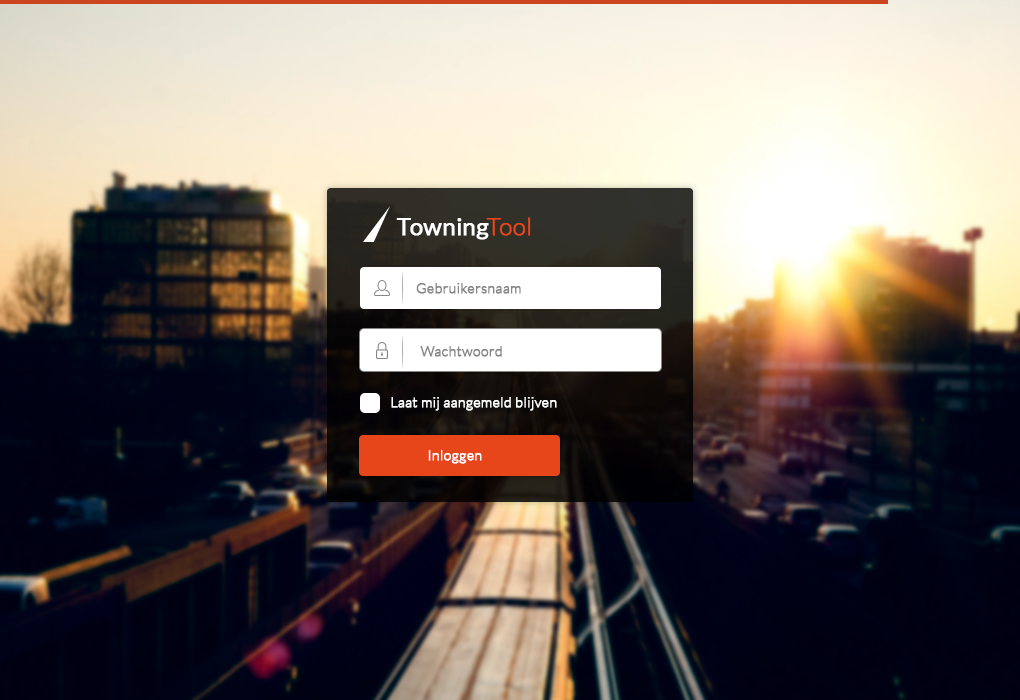
<style>
.page{position:relative;width:1020px;height:700px}
.page>*{position:absolute;margin:0}
.t1{font:24px "Lato-Regular";letter-spacing:0.005em;color:#ffffff;font-weight:bold}
.t2{font:24px "Lato-Light";letter-spacing:0.005em;color:#e7461b;font-weight:bold}
.t3{font:14px "Lato-Light";letter-spacing:0.005em;color:#868685;font-weight:bold}
.t4{font:14px "Lato-Light";letter-spacing:0.005em;color:#ffffff;font-weight:bold}
</style>
<div class="page">
<p class="t1" style="left:396px;top:217px;width:135px;height:23px">Towning<span class="t2">Tool</span></p>
<p class="t3" style="left:416px;top:283px;width:105px;height:11px">Gebruikersnaam</p>
<p class="t3" style="left:420px;top:346px;width:82px;height:11px">Wachtwoord</p>
<p class="t4" style="left:391px;top:397px;width:166px;height:14px">Laat mij aangemeld blijven</p>
<p class="t4" style="left:428px;top:450px;width:54px;height:14px">Inloggen</p>
</div>
